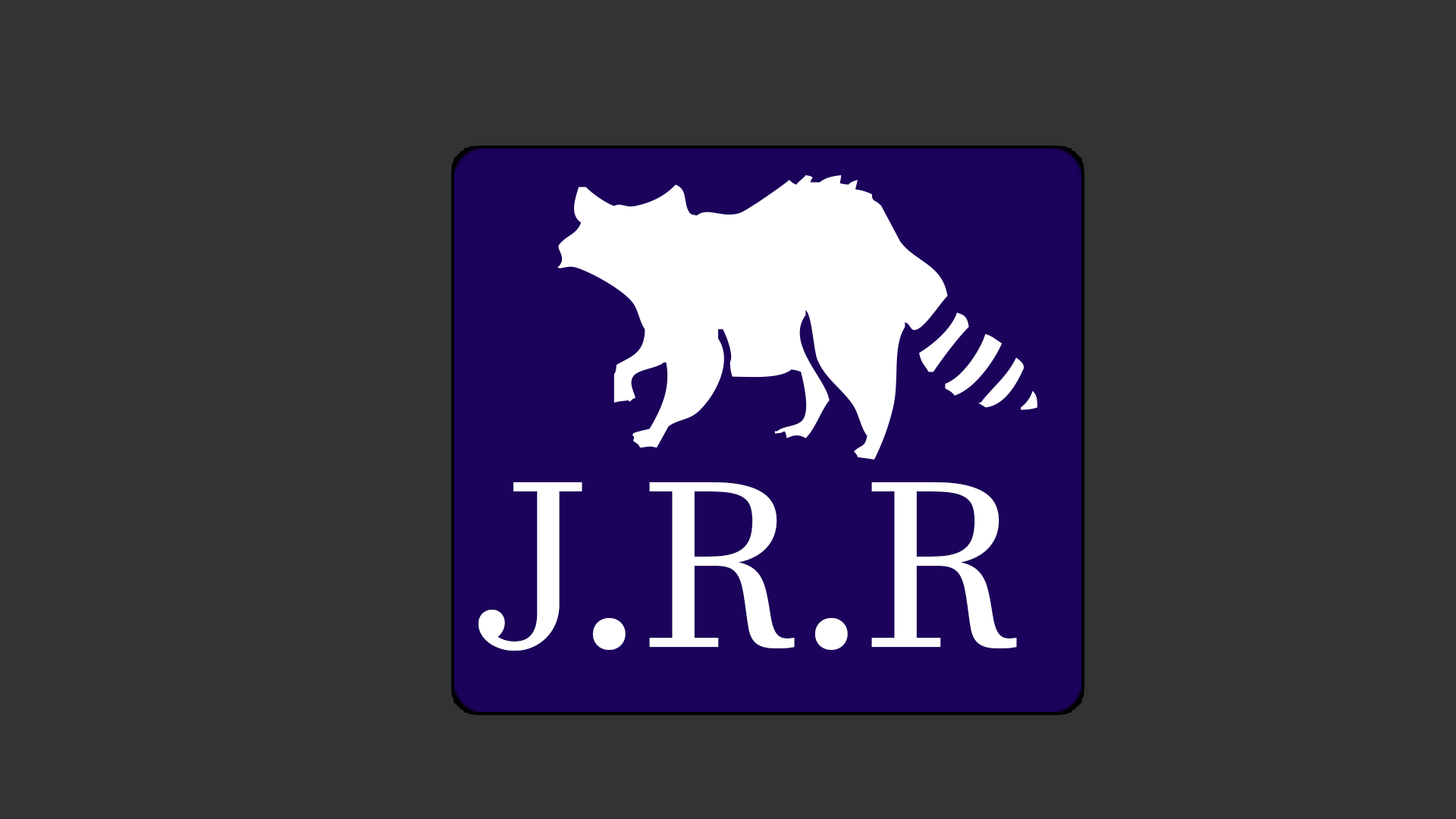
<style>
.page{position:relative;width:1456px;height:819px;background:#333333}
.page>*{position:absolute;margin:0}
.t1{font:232.4px "JavaneseText";color:#ffffff}
</style>
<div class="page">
<p class="t1" style="left:479px;top:482px;width:538px;height:169px">J.R.R</p>
</div>
